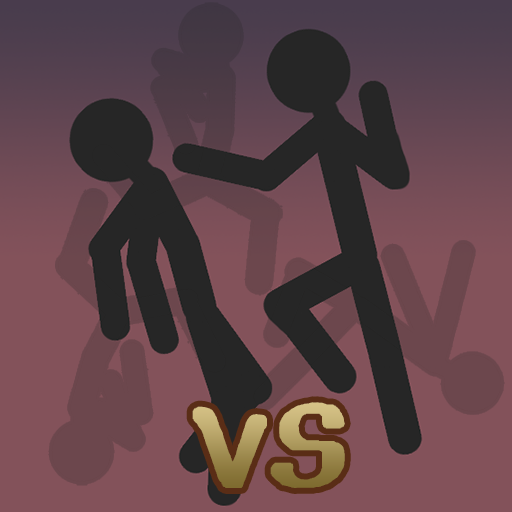
<style>
.page{position:relative;width:512px;height:512px;background:#83525a}
.page>*{position:absolute;margin:0}
.t1{font:62.9px "Gothic3"}
</style>
<div class="page">
<p class="t1" style="left:192px;top:402px;width:153px;height:86px">VS</p>
</div>
